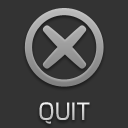
<style>
.page{position:relative;width:128px;height:128px;background:#333333}
.page>*{position:absolute;margin:0}
.t1{font:24px "Exo-Medium";text-transform:uppercase}
</style>
<div class="page">
<p class="t1" style="left:39px;top:102px;width:51px;height:22px">Quit</p>
</div>
